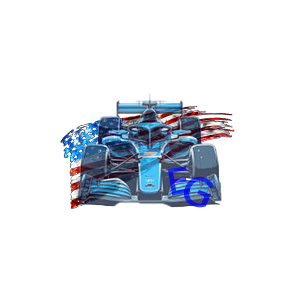
<style>
.page{position:relative;width:300px;height:300px;background:#ffffff}
.page>*{position:absolute;margin:0}
.t1{font:38.3px "Amifer-Regular";font-weight:bold}
.t2{font:43.5px "Amifer-Regular";color:#111fdd;font-weight:bold}
</style>
<div class="page">
<p class="t1" style="left:167px;top:166px;width:24px;height:30px;rotate:-10deg">E</p>
<p class="t2" style="left:184px;top:177px;width:30px;height:31px;rotate:23deg">G</p>
</div>
